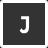
<style>
.page{position:relative;width:48px;height:48px;background:#333333}
.page>*{position:absolute;margin:0}
.t1{font:24px "Montserrat-Bold";color:#ffffff;scale:0.81 1}
</style>
<div class="page">
<p class="t1" style="left:19px;top:16px;width:11px;height:18px">J</p>
</div>
